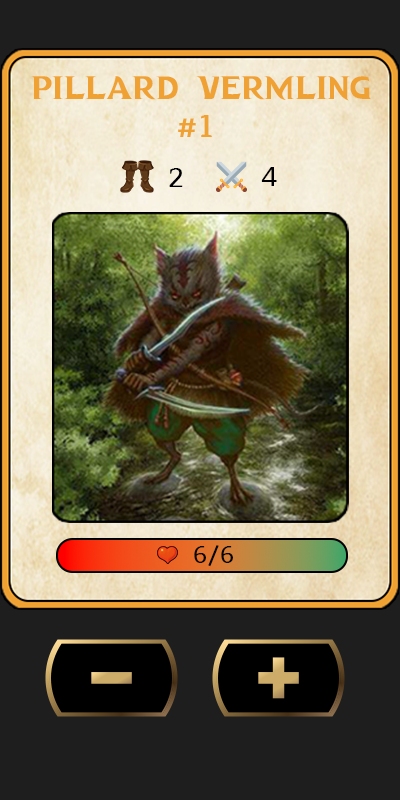
<style>
.page{position:relative;width:400px;height:800px;background:#1e1e1e}
.page>*{position:absolute;margin:0}
.t1{font:31px "DRAGONHUNTER";letter-spacing:0.075em;color:#efa233}
.t2{font:31px "Maitree-SemiBold";letter-spacing:0.075em;color:#efa233}
.t3{font:27px "Maitree-Medium";letter-spacing:0.075em;color:#000000}
.t4{font:24px "Maitree-Medium";letter-spacing:0.075em;color:#000000}
</style>
<div class="page">
<p class="t1" style="left:31px;top:76px;width:340px;height:25px">PILLARD VERMLING</p>
<p class="t2" style="left:178px;top:115px;width:34px;height:22px">#1</p>
<p class="t3" style="left:169px;top:168px;width:14px;height:19px">2</p>
<p class="t3" style="left:261px;top:167px;width:16px;height:19px">4</p>
<p class="t4" style="left:194px;top:545px;width:39px;height:22px">6/6</p>
</div>
